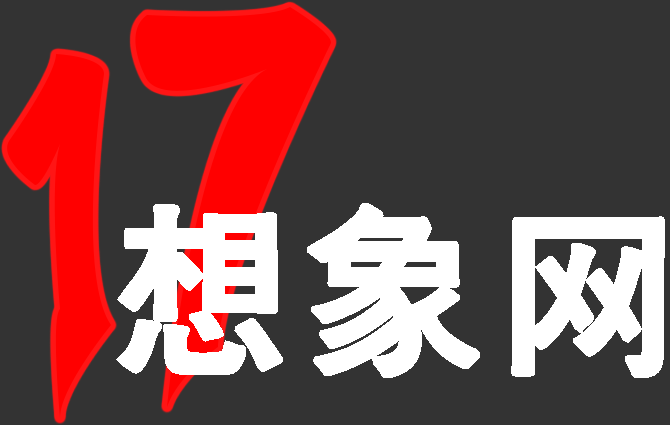
<style>
.page{position:relative;width:670px;height:425px;background:#333333}
.page>*{position:absolute;margin:0}
.t1{font:177.1px "CTCuHeiSJ";letter-spacing:0.06em;color:#ffffff;font-weight:bold}
</style>
<div class="page">
<p class="t1" style="left:116px;top:203px;width:549px;height:175px">想象网</p>
</div>
